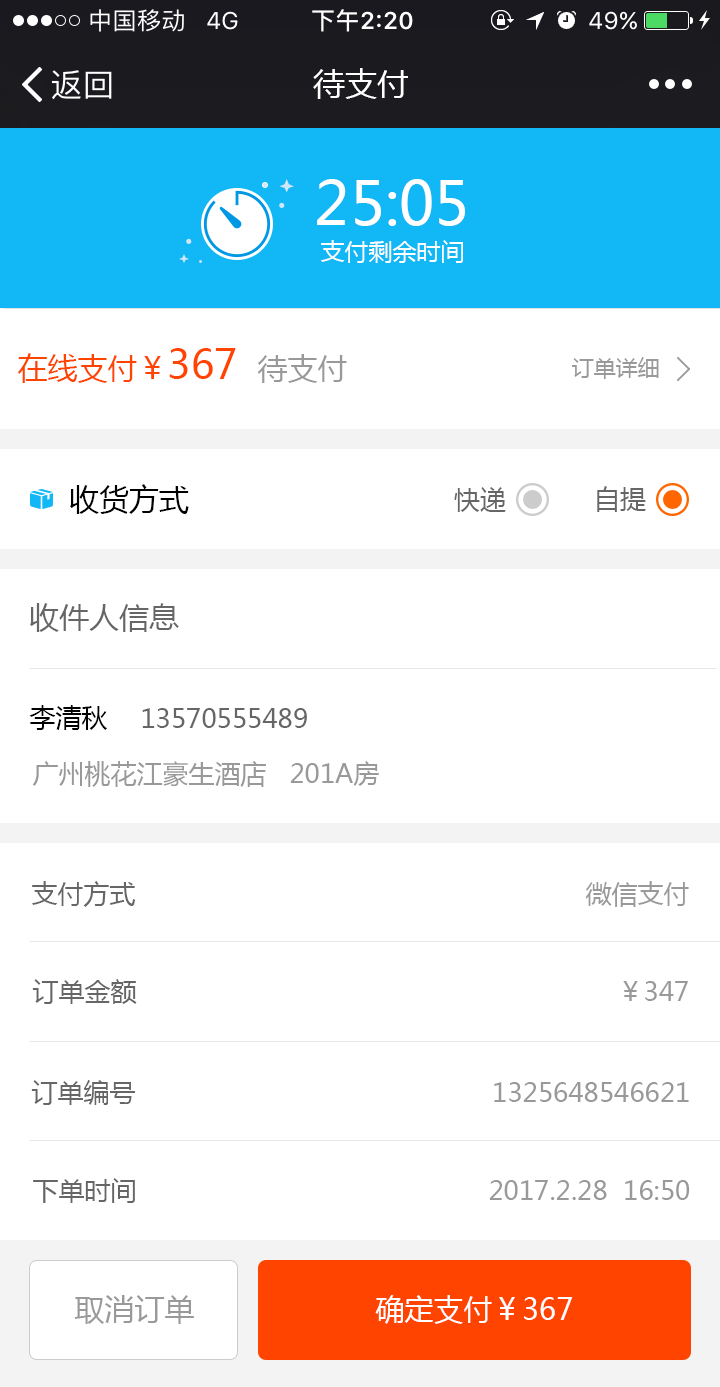
<style>
.page{position:relative;width:720px;height:1387px;background:#ffffff}
.page>*{position:absolute;margin:0}
.t1{font:32px "MicrosoftYaHei";color:#ffffff}
.t2{font:60px "MicrosoftYaHei";color:#ffffff}
.t3{font:24px "MicrosoftYaHei";color:#ffffff}
.t4{font:30px "MicrosoftYaHei";color:#ff4400}
.t5{font:40px "MicrosoftYaHei";color:#ff4400}
.t6{font:30px "MicrosoftYaHei";color:#999999}
.t7{font:22px "MicrosoftYaHei";color:#999999}
.t8{font:30px "MicrosoftYaHei";color:#000000}
.t9{font:26px "MicrosoftYaHei";color:#666666}
.t10{font:30px "MicrosoftYaHei";color:#666666}
.t11{font:26px "MicrosoftYaHei";color:#000000}
.t12{font:26px "MicrosoftYaHei";color:#999999}
.t13{font:30px "MicrosoftYaHei";color:#ffffff}
</style>
<div class="page">
<p class="t1" style="left:313px;top:68px;width:95px;height:31px">待支付</p>
<p class="t2" style="left:317px;top:179px;width:148px;height:47px">25:05</p>
<p class="t3" style="left:321px;top:240px;width:142px;height:23px">支付剩余时间</p>
<p class="t4" style="left:17px;top:348px;width:219px;height:35px">在线支付￥<span class="t5">367</span></p>
<p class="t6" style="left:257px;top:354px;width:90px;height:29px">待支付</p>
<p class="t7" style="left:572px;top:357px;width:87px;height:22px">订单详细</p>
<p class="t8" style="left:70px;top:484px;width:119px;height:30px">收货方式</p>
<p class="t9" style="left:597px;top:486px;width:49px;height:26px">自提</p>
<p class="t9" style="left:454px;top:487px;width:52px;height:25px">快递</p>
<p class="t10" style="left:30px;top:603px;width:149px;height:29px">收件人信息</p>
<p class="t11" style="left:29px;top:705px;width:79px;height:25px">李清秋</p>
<p class="t9" style="left:142px;top:708px;width:165px;height:20px">13570555489</p>
<p class="t12" style="left:32px;top:761px;width:347px;height:26px">广州桃花江豪生酒店   201A房</p>
<p class="t9" style="left:32px;top:881px;width:104px;height:26px">支付方式</p>
<p class="t12" style="left:585px;top:881px;width:104px;height:26px">微信支付</p>
<p class="t9" style="left:32px;top:979px;width:105px;height:25px">订单金额</p>
<p class="t12" style="left:623px;top:981px;width:65px;height:20px">￥347</p>
<p class="t9" style="left:31px;top:1080px;width:104px;height:25px">订单编号</p>
<p class="t12" style="left:494px;top:1082px;width:195px;height:20px">1325648546621</p>
<p class="t9" style="left:33px;top:1178px;width:102px;height:25px">下单时间</p>
<p class="t12" style="left:489px;top:1180px;width:201px;height:20px">2017.2.28  16:50</p>
<p class="t6" style="left:74px;top:1295px;width:120px;height:29px">取消订单</p>
<p class="t13" style="left:375px;top:1295px;width:198px;height:29px">确定支付￥367</p>
</div>
